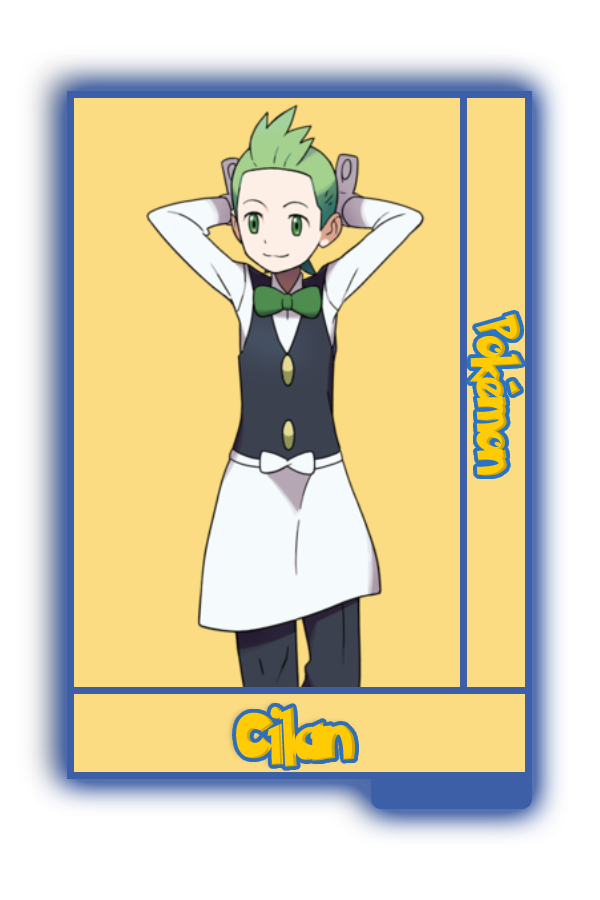
<style>
.page{position:relative;width:600px;height:900px;background:#fbdc83}
.page>*{position:absolute;margin:0}
.t1{font:48.8px "PokemonSolidNormal";color:#ffcb05;scale:0.8 1}
.t2{font:56.6px "PokemonSolidNormal";color:#ffcb05;scale:0.92 1}
</style>
<div class="page">
<p class="t1" style="left:469px;top:313px;width:54px;height:163px;rotate:90deg">Pokémon</p>
<p class="t2" style="left:236px;top:706px;width:120px;height:61px">Cilan</p>
</div>
